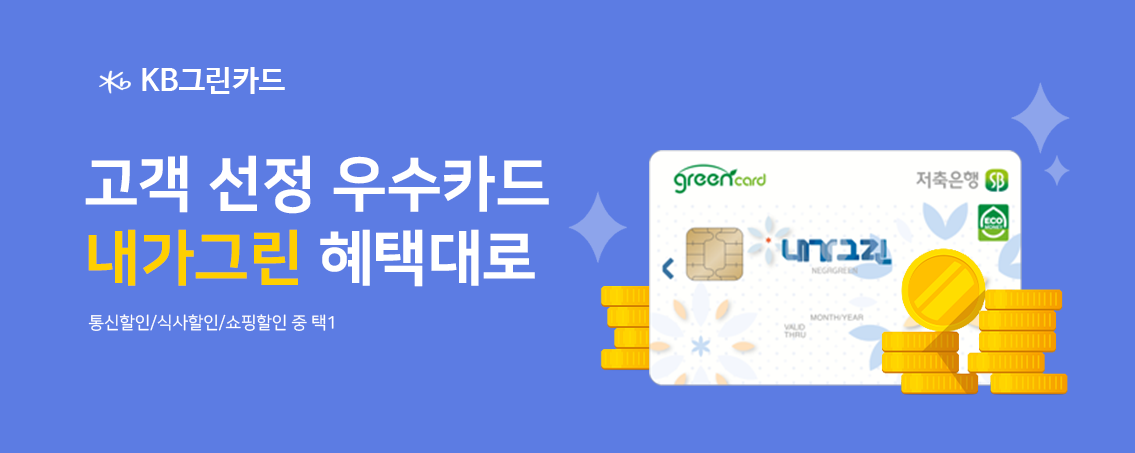
<style>
.page{position:relative;width:1135px;height:453px;background:#5c7ce3}
.page>*{position:absolute;margin:0}
.t1{font:30px "NanumBarunGothicBold";color:#ffffff}
.t2{font:60px "NanumSquareEB";color:#ffffff}
.t3{font:60px "NanumSquareEB";color:#ffcf00}
.t4{font:17px "NanumSquareR";color:#ffffff}
</style>
<div class="page">
<p class="t1" style="left:142px;top:67px;width:143px;height:27px">KB그린카드</p>
<p class="t2" style="left:85px;top:155px;width:464px;height:59px">고객 선정 우수카드</p>
<p class="t3" style="left:88px;top:229px;width:447px;height:58px">내가그린 <span class="t2">혜택대로</span></p>
<p class="t4" style="left:88px;top:314px;width:246px;height:17px">통신할인/식사할인/쇼핑할인 중 택1</p>
</div>
